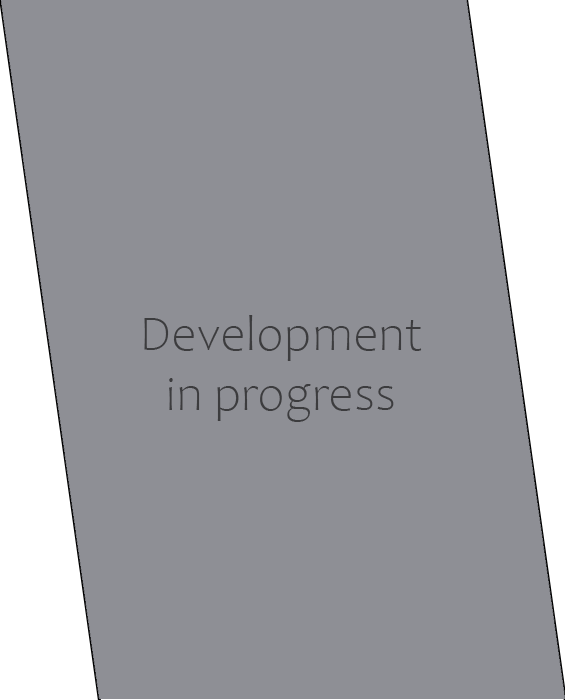
<style>
.page{position:relative;width:565px;height:700px;background:#8e8f95}
.page>*{position:absolute;margin:0}
.t1{font:50px "Candara-Light";color:#3c3c3e}
</style>
<div class="page">
<p class="t1" style="left:144px;top:315px;width:278px;height:107px;text-align:center">Development<br>in progress</p>
</div>
